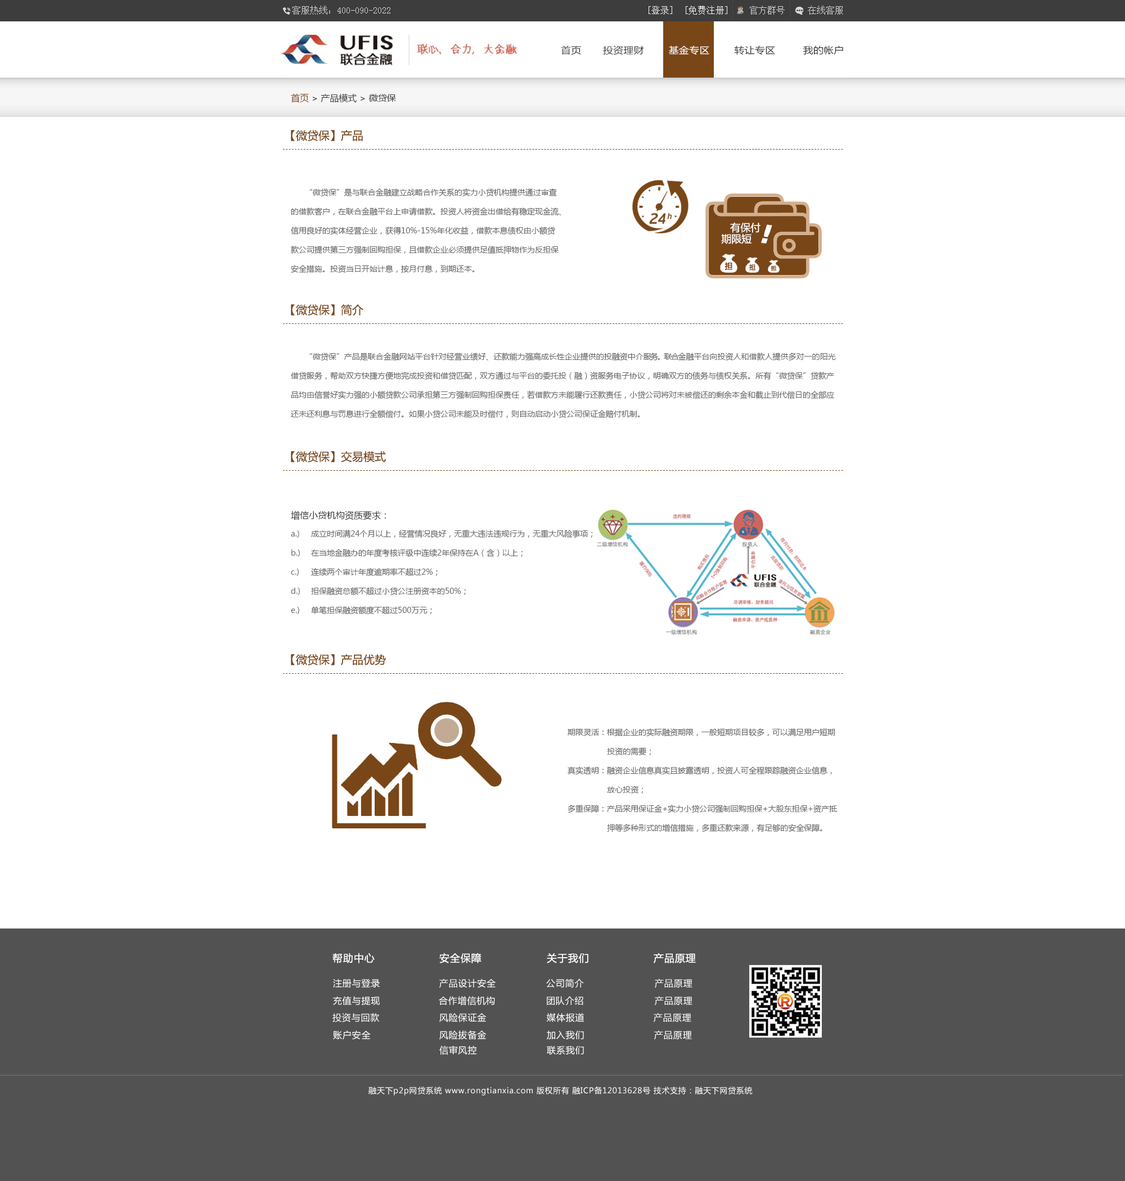
<style>
.page{position:relative;width:1125px;height:1181px;background:#ffffff}
.page>*{position:absolute;margin:0}
.t1{font:9px "SimSun";color:#d6d6d6}
.t2{font:9px "SimSun";color:#fefefe}
.t3{font:9px "SimSun";color:#fffefe}
.t4{font:9.1px "MicrosoftYaHei";letter-spacing:0.01em;color:#333333;scale:1.11 1}
.t5{font:9.1px "MicrosoftYaHei";letter-spacing:0.01em;color:#fffefe;scale:1.11 1}
.t6{font:9px "MicrosoftYaHei";color:#3b3a3a}
.t7{font:9px "MicrosoftYaHei";color:#794617}
.t8{font:11.2px "MicrosoftYaHei";color:#794617}
.t9{font:7.9px/19.1px "MicrosoftYaHei";color:#666666}
.t10{font:10.1px/11.2px "MicrosoftYaHei";color:#fffefe}
.t11{font:25.9px "hzgb";letter-spacing:0.075em;color:#fffefe;font-style:italic}
.t12{font:25.9px "hzgb";letter-spacing:0.075em;color:#fffefe}
.t13{font:7.8px "MicrosoftYaHei";color:#794617;font-weight:bold}
.t14{font:6.5px "MicrosoftYaHei";color:#794617;font-weight:bold;scale:0.97 1}
.t15{font:5.3px "MicrosoftYaHei";color:#794617;font-weight:bold}
.t16{font:7.9px/19.1px "MicrosoftYaHei";letter-spacing:-0.12em;color:#666666}
.t17{font:9px/19.1px "MicrosoftYaHei";color:#323232}
.t18{font:10.1px "MicrosoftYaHei";letter-spacing:0.05em;color:#ffffff}
.t19{font:9px "MicrosoftYaHei";letter-spacing:0.05em;color:#ffffff}
.t20{font:7.9px "MicrosoftYaHei";letter-spacing:0.05em;color:#ffffff}
</style>
<div class="page">
<p class="t1" style="left:292px;top:6px;width:98px;height:9px">客服热线：400-090-2022</p>
<p class="t2" style="left:649px;top:6px;width:23px;height:9px">[登录]</p>
<p class="t3" style="left:686px;top:6px;width:41px;height:9px">[免费注册]</p>
<p class="t1" style="left:749px;top:6px;width:94px;height:9px">官方群号     在线客服</p>
<p class="t4" style="left:561px;top:46px;width:282px;height:9px">首页       投资理财        <span class="t5">基金专区</span>        转让专区         我的帐户</p>
<p class="t6" style="left:291px;top:93px;width:105px;height:10px"><span class="t7">首页 </span>&gt; 产品模式 &gt; 微贷保</p>
<p class="t8" style="left:291px;top:130px;width:72px;height:11px">【微贷保】产品</p>
<p class="t9" style="left:291px;top:188px;width:270px;height:85px">“微贷保”是与联合金融建立战略合作关系的实力小贷机构提供通过审查<br>的借款客户，在联合金融平台上申请借款。投资人将资金出借给有稳定现金流、<br>信用良好的实体经营企业，获得10%-15%年化收益，借款本息债权由小额贷<br>款公司提供第三方强制回购担保，且借款企业必须提供足值抵押物作为反担保<br>安全措施。投资当日开始计息，按月付息，到期还本。</p>
<p class="t10" style="left:721px;top:222px;width:39px;height:22px">有保付<br> 期限短</p>
<p class="t11" style="left:761px;top:224px;width:11px;height:20px;rotate:8deg"><span class="t12"> </span>！</p>
<p class="t13" style="left:724px;top:262px;width:9px;height:8px">担</p>
<p class="t14" style="left:749px;top:264px;width:6px;height:7px">担</p>
<p class="t15" style="left:771px;top:266px;width:6px;height:5px">担</p>
<p class="t8" style="left:291px;top:304px;width:72px;height:12px">【微贷保】简介</p>
<p class="t9" style="left:291px;top:353px;width:545px;height:65px">“微贷保”产品是联合金融网站平台针对经营业绩好、还款能力强高成长性企业提供的投融资中介<span class="t16">服务。联合</span>金融平台向投资人和借款人提供多对一的阳光<br>借贷服务，帮助双方快捷方便地完成投资和借贷匹配，双方通过与平台的委托投（融）资服务电子协议，明确双方的债务与债权关系。所有“微贷保”贷款产<br>品均由信誉好实力强的小额贷款公司承担第三方强制回购担保责任，若借款方未能履行还款责任，小贷公司将对未被偿还的剩余本金和截止到代偿日的全部应<br>还未还利息与罚息进行全额偿付。如果小贷公司未能及时偿付，则自动启动小贷公司保证金赔付机制。</p>
<p class="t8" style="left:291px;top:451px;width:95px;height:11px">【微贷保】交易模式</p>
<p class="t9" style="left:291px;top:511px;width:302px;height:104px"><span class="t17">增信小贷机构资质要求：<br></span>a.) 成立时间满24个月以上，经营情况良好，无重大违法违规行为，无重大风险事项；<br>b.) 在当地金融办的年度考核评级中连续2年保持在A（含）以上；<br>c.) 连续两个审计年度逾期率不超过2%；<br>d.) 担保融资总额不超过小贷公注册资本的50%；<br>e.) 单笔担保融资额度不超过500万元；</p>
<p class="t8" style="left:291px;top:654px;width:95px;height:11px">【微贷保】产品优势</p>
<p class="t9" style="left:568px;top:728px;width:269px;height:104px">期限灵活：根据企业的实际融资期限，一般短期项目较多，可以满足用户短期<br>                 投资的需要；<br>真实透明：融资企业信息真实且披露透明，投资人可全程跟踪融资企业信息，<br>                 放心投资；<br>多重保障：产品采用保证金+实力小贷公司强制回购担保+大股东担保+资产抵<br>                 押等多种形式的增信措施，多重还款来源，有足够的安全保障。</p>
<p class="t18" style="left:332px;top:953px;width:43px;height:11px">帮助中心</p>
<p class="t18" style="left:439px;top:953px;width:43px;height:11px">安全保障</p>
<p class="t18" style="left:547px;top:953px;width:41px;height:11px">关于我们</p>
<p class="t18" style="left:654px;top:953px;width:42px;height:11px">产品原理</p>
<p class="t19" style="left:333px;top:979px;width:47px;height:9px">注册与登录</p>
<p class="t19" style="left:439px;top:979px;width:57px;height:9px">产品设计安全</p>
<p class="t19" style="left:546px;top:979px;width:38px;height:9px">公司简介</p>
<p class="t19" style="left:655px;top:979px;width:37px;height:9px">产品原理</p>
<p class="t19" style="left:333px;top:996px;width:47px;height:10px">充值与提现</p>
<p class="t19" style="left:439px;top:996px;width:56px;height:10px">合作增信机构</p>
<p class="t19" style="left:547px;top:996px;width:36px;height:10px">团队介绍</p>
<p class="t19" style="left:655px;top:996px;width:37px;height:10px">产品原理</p>
<p class="t19" style="left:332px;top:1013px;width:47px;height:10px">投资与回款</p>
<p class="t19" style="left:439px;top:1013px;width:48px;height:10px">风险保证金</p>
<p class="t19" style="left:546px;top:1013px;width:38px;height:10px">媒体报道</p>
<p class="t19" style="left:654px;top:1013px;width:37px;height:10px">产品原理</p>
<p class="t19" style="left:333px;top:1030px;width:38px;height:10px">账户安全</p>
<p class="t19" style="left:439px;top:1030px;width:48px;height:10px">风险拔备金</p>
<p class="t19" style="left:547px;top:1030px;width:37px;height:10px">加入我们</p>
<p class="t19" style="left:654px;top:1030px;width:38px;height:10px">产品原理</p>
<p class="t19" style="left:439px;top:1046px;width:38px;height:9px">信审风控</p>
<p class="t19" style="left:547px;top:1046px;width:37px;height:9px">联系我们</p>
<p class="t20" style="left:368px;top:1087px;width:385px;height:9px">融天下p2p网贷系统 www.rongtianxia.com 版权所有 融ICP备12013628号 技术支持：融天下网贷系统</p>
</div>
